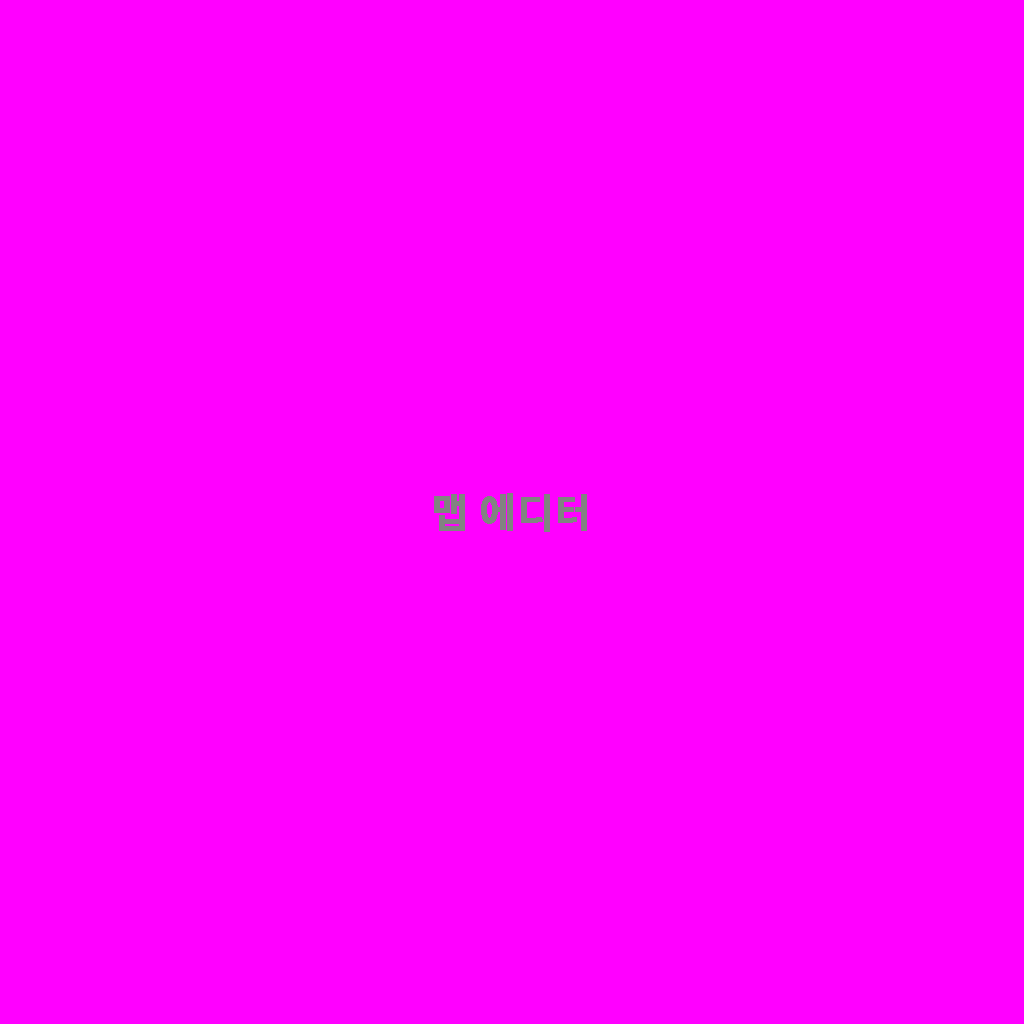
<style>
.page{position:relative;width:1024px;height:1024px;background:#ff00ff}
.page>*{position:absolute;margin:0}
.t1{font:40px "NotoSansKR-Bold";color:#828282;font-weight:bold}
</style>
<div class="page">
<p class="t1" style="left:434px;top:493px;width:153px;height:39px">맵 에디터</p>
</div>
